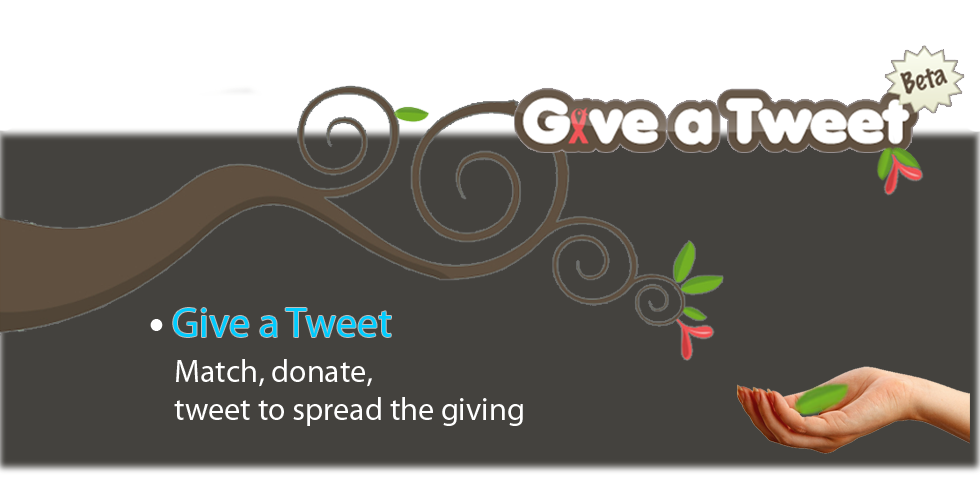
<style>
.page{position:relative;width:980px;height:497px;background:#44423e}
.page>*{position:absolute;margin:0}
.t1{font:42px "MyriadPro-Regular";color:#00ccff}
.t2{font:32px "MyriadPro-Regular";color:#ffffff}
</style>
<div class="page">
<p class="t1" style="left:173px;top:308px;width:218px;height:29px">Give a Tweet</p>
<p class="t2" style="left:174px;top:359px;width:349px;height:67px">Match, donate, <br>tweet to spread the giving</p>
</div>
